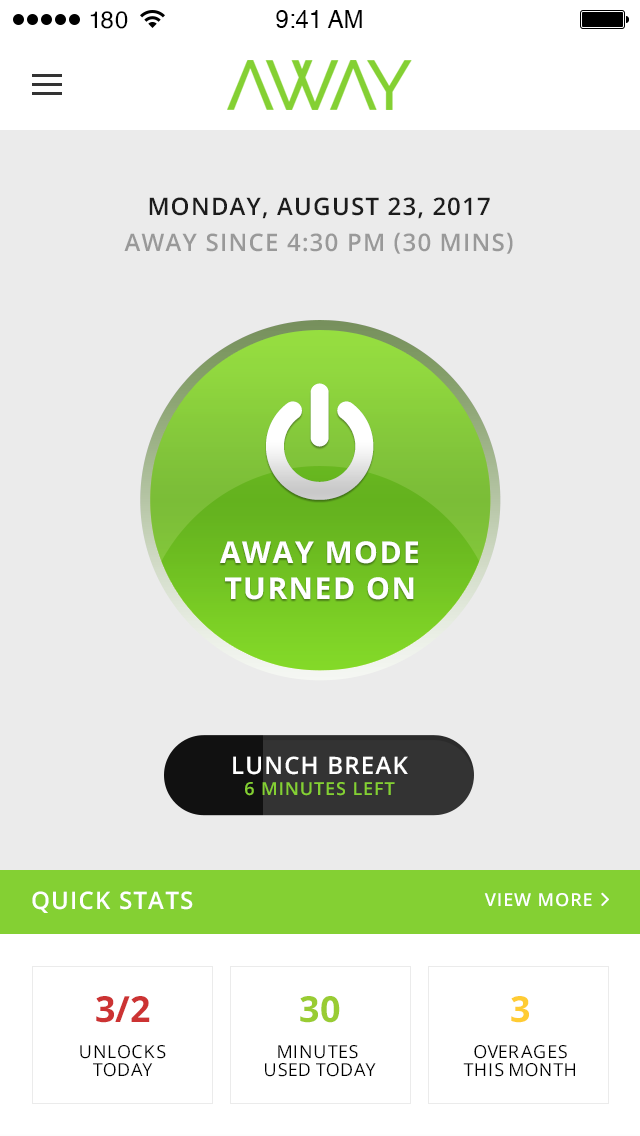
<style>
.page{position:relative;width:640px;height:1136px;background:#ebebeb}
.page>*{position:absolute;margin:0}
.t1{font:24px/36px "OpenSans-Semibold";letter-spacing:0.05em;color:#999999;text-transform:uppercase}
.t2{font:24px "OpenSans-Semibold";letter-spacing:0.05em;color:#1c1c1c;text-transform:uppercase}
.t3{font:18px "OpenSans-Semibold";letter-spacing:0.05em;color:#84d033;text-transform:uppercase}
.t4{font:24px "OpenSans-Semibold";letter-spacing:0.05em;color:#ffffff;text-transform:uppercase}
.t5{font:18px/18px "OpenSans";color:#000000;text-transform:uppercase}
.t6{font:36px/24px "OpenSans-Bold";color:#cc3333}
.t7{font:36px/24px "OpenSans-Bold";color:#99cc33}
.t8{font:36px/24px "OpenSans-Bold";color:#ffcc33}
</style>
<div class="page">
<p class="t1" style="left:124px;top:197px;width:389px;height:57px;text-align:center"><span class="t2">MONDAY, AUGUST 23, 2017<br></span>away since 4:30 PM (30 Mins)</p>
<p class="t3" style="left:233px;top:756px;width:175px;height:40px;text-align:center"><span class="t4">LUNCH BREAK<br></span>6 MInutes left</p>
<p class="t4" style="left:32px;top:891px;width:161px;height:22px">QUICK STATS</p>
<p class="t5" style="left:80px;top:996px;width:86px;height:81px;text-align:center"><span class="t6">3/2<br></span><br>Unlocks<br>TODAY</p>
<p class="t5" style="left:265px;top:996px;width:111px;height:81px;text-align:center"><span class="t7">30<br></span><br>MINUTES <br>USED TODAY</p>
<p class="t5" style="left:463px;top:996px;width:112px;height:81px;text-align:center"><span class="t8">3<br></span><br>OVERAGES<br>THIS MONTH</p>
</div>
